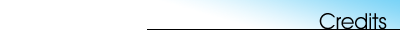
<style>
.page{position:relative;width:400px;height:30px;background:#ffffff}
.page>*{position:absolute;margin:0}
.t1{font:22px "AvantGardeITCbyBT-Book";color:#000000}
</style>
<div class="page">
<p class="t1" style="left:319px;top:13px;width:68px;height:17px">Credits</p>
</div>
